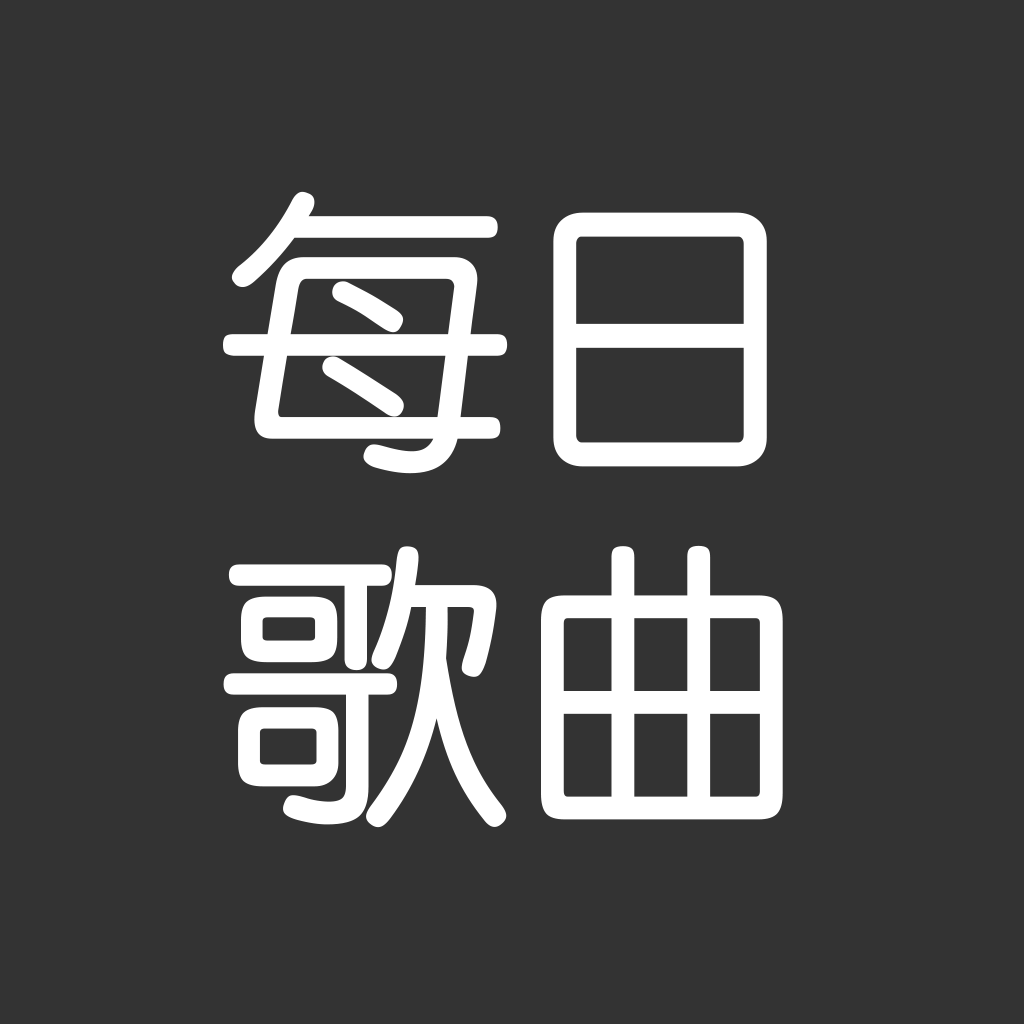
<style>
.page{position:relative;width:1024px;height:1024px;background:#333333}
.page>*{position:absolute;margin:0}
.t1{font:294.7px "STYuanti-TC-Regular";color:#ffffff}
</style>
<div class="page">
<p class="t1" style="left:223px;top:191px;width:560px;height:637px;text-align:center">每日<br>歌曲</p>
</div>
